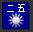
<style>
.page{position:relative;width:33px;height:32px;background:#000090}
.page>*{position:absolute;margin:0}
.t1{font:10.4px "SimSun";color:#ffffff}
</style>
<div class="page">
<p class="t1" style="left:7px;top:4px;width:18px;height:8px">二五</p>
</div>
